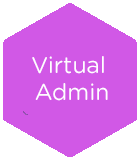
<style>
.page{position:relative;width:140px;height:160px;background:#d158e6}
.page>*{position:absolute;margin:0}
.t1{font:23px "GothamRounded-Book";color:#fffdff}
</style>
<div class="page">
<p class="t1" style="left:32px;top:56px;width:76px;height:45px;text-align:center">Virtual<br> Admin</p>
</div>
